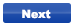
<style>
.page{position:relative;width:75px;height:25px;background:#ffffff}
.page>*{position:absolute;margin:0}
.t1{font:11.2px "Arial-Black";color:#ffffff}
</style>
<div class="page">
<p class="t1" style="left:22px;top:9px;width:29px;height:10px">Next</p>
</div>
